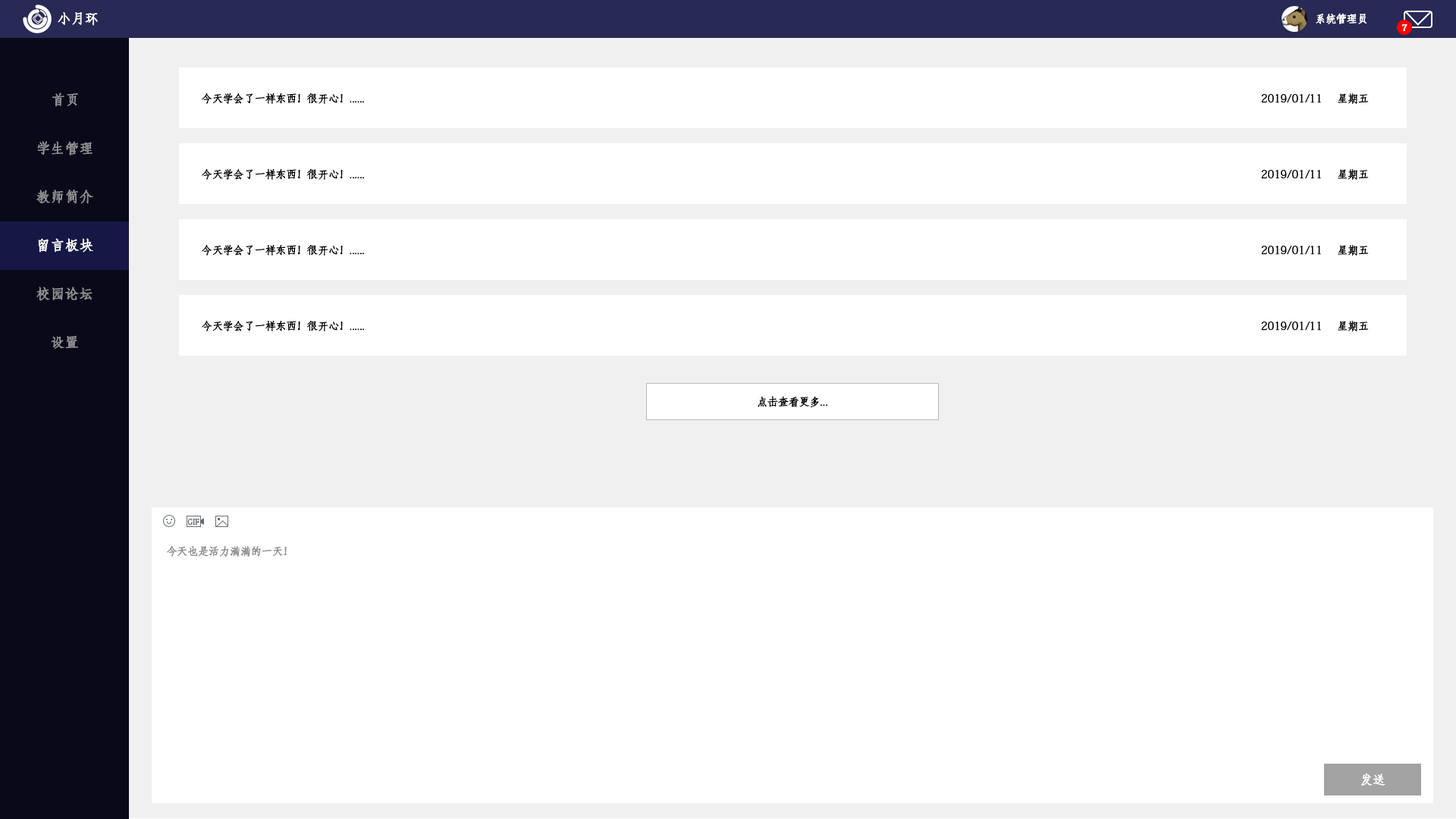
<style>
.page{position:relative;width:1456px;height:819px;background:#ffffff}
.page>*{position:absolute;margin:0}
.t1{font:13.4px "AdobeFangsongStd-Regular";color:#ffffff;font-weight:bold}
.t2{font:10.6px "AdobeFangsongStd-Regular";color:#ffffff;font-weight:bold}
.t3{font:9.1px "AdobeFangsongStd-Regular";color:#ffffff;font-weight:bold}
.t4{font:13.6px "AdobeFangsongStd-Regular";color:#8f8f92;font-weight:bold}
.t5{font:10.6px "AdobeFangsongStd-Regular";color:#000000;font-weight:bold}
.t6{font:13.6px "AdobeFangsongStd-Regular";color:#ffffff;font-weight:bold}
.t7{font:7.6px "AdobeFangsongStd-Regular";color:#666e71;font-weight:bold}
.t8{font:10.6px "AdobeFangsongStd-Regular";color:#8d8d8d;font-weight:bold}
.t9{font:12.1px "AdobeFangsongStd-Regular";color:#fffefe;font-weight:bold}
</style>
<div class="page">
<p class="t1" style="left:58px;top:12px;width:40px;height:14px">小月环</p>
<p class="t2" style="left:1316px;top:13px;width:50px;height:11px">系统管理员</p>
<p class="t3" style="left:1401px;top:24px;width:6px;height:7px">7</p>
<p class="t4" style="left:52px;top:93px;width:26px;height:14px">首页</p>
<p class="t5" style="left:202px;top:93px;width:162px;height:11px">今天学会了一样东西！很开心！......</p>
<p class="t5" style="left:1261px;top:93px;width:108px;height:11px">2019/01/11     星期五</p>
<p class="t4" style="left:37px;top:141px;width:56px;height:14px">学生管理</p>
<p class="t5" style="left:202px;top:168px;width:162px;height:12px">今天学会了一样东西！很开心！......</p>
<p class="t5" style="left:1261px;top:169px;width:108px;height:11px">2019/01/11     星期五</p>
<p class="t4" style="left:36px;top:190px;width:57px;height:14px">教师简介</p>
<p class="t6" style="left:38px;top:238px;width:55px;height:15px">留言板块</p>
<p class="t5" style="left:202px;top:244px;width:162px;height:12px">今天学会了一样东西！很开心！......</p>
<p class="t5" style="left:1261px;top:245px;width:108px;height:11px">2019/01/11     星期五</p>
<p class="t4" style="left:36px;top:287px;width:57px;height:14px">校园论坛</p>
<p class="t5" style="left:202px;top:320px;width:162px;height:11px">今天学会了一样东西！很开心！......</p>
<p class="t5" style="left:1261px;top:321px;width:108px;height:10px">2019/01/11     星期五</p>
<p class="t4" style="left:51px;top:335px;width:27px;height:14px">设置</p>
<p class="t5" style="left:758px;top:396px;width:69px;height:11px">点击查看更多...</p>
<p class="t7" style="left:187px;top:519px;width:12px;height:7px">GIF</p>
<p class="t8" style="left:167px;top:545px;width:120px;height:12px">今天也是活力满满的一天！</p>
<p class="t9" style="left:1361px;top:773px;width:24px;height:13px">发送</p>
</div>
